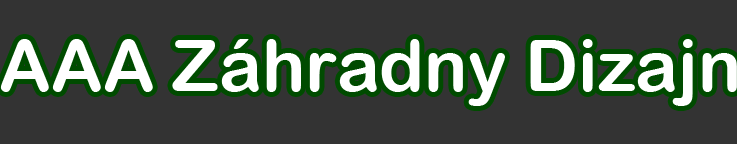
<style>
.page{position:relative;width:737px;height:144px;background:#333333}
.page>*{position:absolute;margin:0}
.t1{font:72px "ArialRoundedMTBold";color:#ffffff}
</style>
<div class="page">
<p class="t1" style="left:0px;top:39px;width:737px;height:67px">AAA Záhradny Dizajn</p>
</div>
